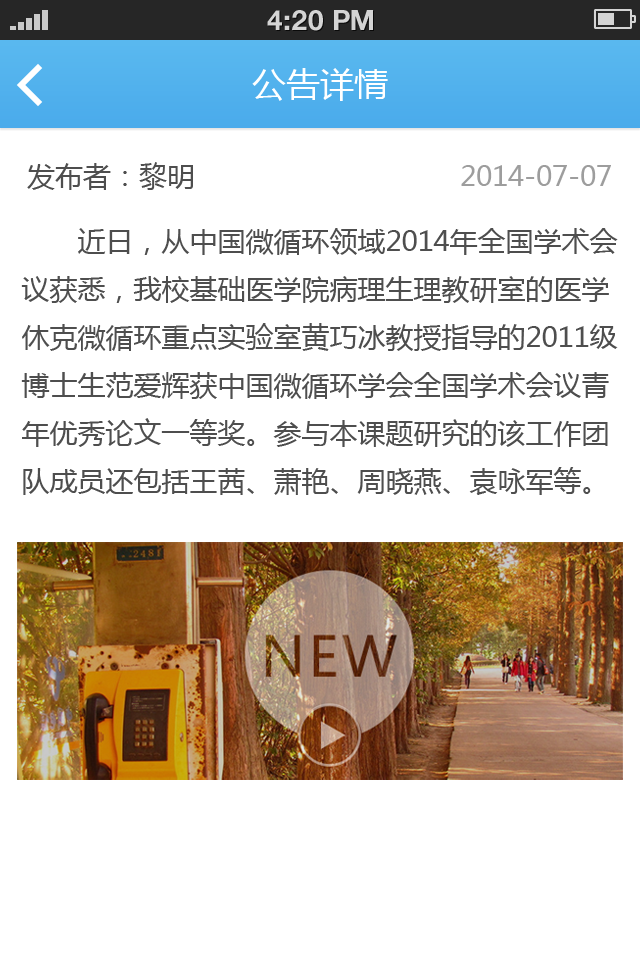
<style>
.page{position:relative;width:640px;height:960px;background:#ffffff}
.page>*{position:absolute;margin:0}
.t1{font:28px "HelveticaNeueLTStd-Bd";color:#d4d4d4;text-transform:uppercase}
.t2{font:34px "MicrosoftYaHei";color:#ffffff}
.t3{font:28px "MicrosoftYaHei";color:#4e4e4e}
.t4{font:28px "MicrosoftYaHei";color:#9d9d9d}
.t5{font:28px/48px "MicrosoftYaHei";color:#4e4e4e}
</style>
<div class="page">
<p class="t1" style="left:267px;top:10px;width:106px;height:21px">4:20 PM</p>
<p class="t2" style="left:252px;top:68px;width:136px;height:33px">公告详情</p>
<p class="t3" style="left:27px;top:162px;width:166px;height:28px">发布者：黎明</p>
<p class="t4" style="left:461px;top:165px;width:150px;height:21px">2014-07-07</p>
<p class="t5" style="left:21px;top:228px;width:597px;height:267px">近日，从中国微循环领域2014年全国学术会议获悉，我校基础医学院病理生理教研室的医学休克微循环重点实验室黄巧冰教授指导的2011级博士生范爱辉获中国微循环学会全国学术会议青年优秀论文一等奖。参与本课题研究的该工作团队成员还包括王茜、萧艳、周晓燕、袁咏军等。</p>
</div>
